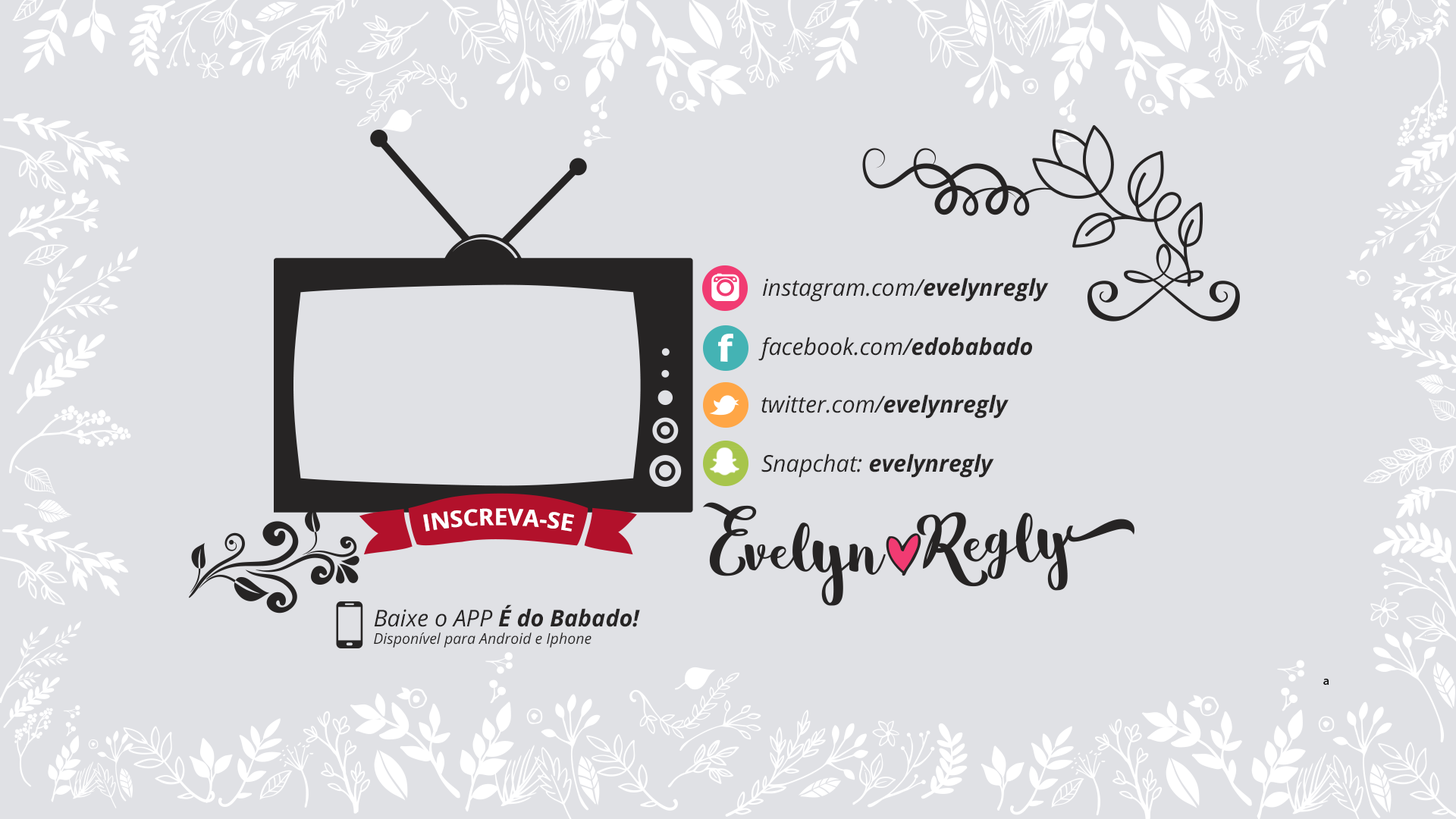
<style>
.page{position:relative;width:1456px;height:819px;background:#e0e1e5}
.page>*{position:absolute;margin:0}
.t1{font:23.1px "OpenSans-Italic";color:#262424}
.t2{font:23.1px "OpenSans-BoldItalic";color:#262424}
.t3{font:23.1px "OpenSans-Bold";color:#ffffff}
.t4{font:14.8px "OpenSans-Italic";color:#262424}
</style>
<div class="page">
<p class="t1" style="left:763px;top:278px;width:286px;height:24px">instagram.com/<span class="t2">evelynregly</span></p>
<p class="t1" style="left:758px;top:337px;width:274px;height:24px">facebook.com/<span class="t2">edobabado</span></p>
<p class="t1" style="left:761px;top:394px;width:248px;height:25px">twitter.com/<span class="t2">evelynregly</span></p>
<p class="t2" style="left:761px;top:453px;width:233px;height:25px"><span class="t1">Snapchat: </span>evelynregly</p>
<p class="t3" style="left:423px;top:508px;width:151px;height:24px">INSCREVA-SE</p>
<p class="t4" style="left:374px;top:604px;width:266px;height:44px"><span class="t1">Baixe o APP </span><span class="t2">É do Babado! <br></span>Disponível para Android e Iphone</p>
</div>
